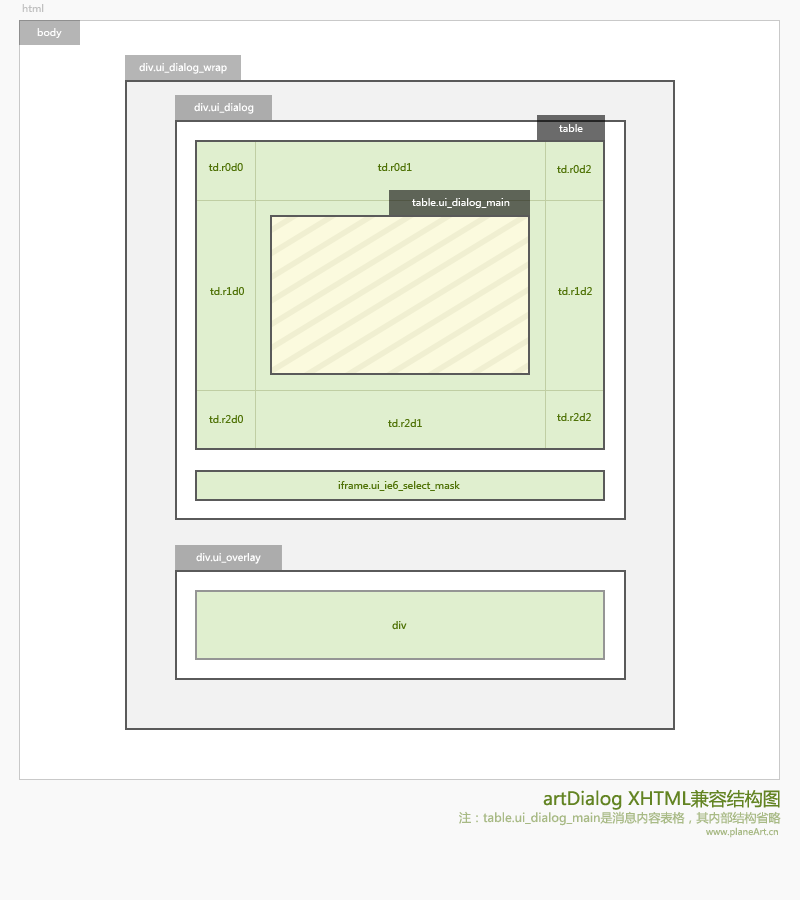
<style>
.page{position:relative;width:800px;height:900px;background:#ffffff}
.page>*{position:absolute;margin:0}
.t1{font:10px "MicrosoftYaHei";color:#c0c0c0}
.t2{font:10px "MicrosoftYaHei";color:#ffffff}
.t3{font:10px "MicrosoftYaHei";color:#507308}
.t4{font:18px "MicrosoftYaHei";color:#638423}
.t5{font:12px "MicrosoftYaHei";color:#a8ba85}
.t6{font:9px "MicrosoftYaHei";color:#a8ba85}
</style>
<div class="page">
<p class="t1" style="left:22px;top:4px;width:22px;height:8px">html</p>
<p class="t2" style="left:37px;top:28px;width:25px;height:10px">body</p>
<p class="t2" style="left:139px;top:63px;width:88px;height:11px">div.ui_dialog_wrap</p>
<p class="t2" style="left:194px;top:103px;width:60px;height:11px">div.ui_dialog</p>
<p class="t2" style="left:559px;top:124px;width:24px;height:8px">table</p>
<p class="t3" style="left:208px;top:163px;width:35px;height:8px">td.r0d0</p>
<p class="t3" style="left:377px;top:163px;width:35px;height:8px">td.r0d1</p>
<p class="t3" style="left:557px;top:165px;width:34px;height:8px">td.r0d2</p>
<p class="t2" style="left:412px;top:198px;width:98px;height:10px">table.ui_dialog_main</p>
<p class="t3" style="left:210px;top:287px;width:34px;height:8px">td.r1d0</p>
<p class="t3" style="left:558px;top:287px;width:34px;height:8px">td.r1d2</p>
<p class="t3" style="left:557px;top:413px;width:34px;height:8px">td.r2d2</p>
<p class="t3" style="left:209px;top:415px;width:34px;height:8px">td.r2d0</p>
<p class="t3" style="left:388px;top:419px;width:34px;height:8px">td.r2d1</p>
<p class="t3" style="left:338px;top:481px;width:122px;height:10px">iframe.ui_ie6_select_mask</p>
<p class="t2" style="left:196px;top:553px;width:65px;height:11px">div.ui_overlay</p>
<p class="t3" style="left:392px;top:621px;width:15px;height:9px">div</p>
<p class="t4" style="left:543px;top:789px;width:237px;height:21px">artDialog XHTML兼容结构图</p>
<p class="t5" style="left:459px;top:811px;width:322px;height:15px">注：table.ui_dialog_main是消息内容表格，其内部结构省略</p>
<p class="t6" style="left:706px;top:827px;width:72px;height:11px">www.planeArt.cn</p>
</div>
